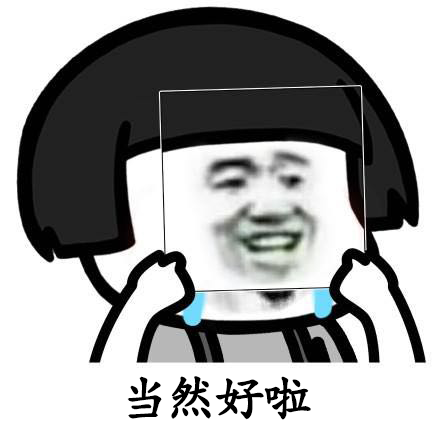
<style>
.page{position:relative;width:440px;height:440px;background:#ffffff}
.page>*{position:absolute;margin:0}
.t1{font:51px "STKaitiTC-Regular";letter-spacing:-0.08em;color:#000000;font-weight:bold}
</style>
<div class="page">
<p class="t1" style="left:127px;top:376px;width:184px;height:44px">当然好啦</p>
</div>
